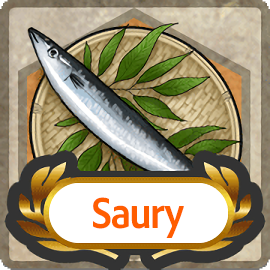
<style>
.page{position:relative;width:270px;height:270px}
.page>*{position:absolute;margin:0}
.t1{font:45px "AdobeClean-Bold";letter-spacing:-0.04em;color:#ff5d00;scale:0.9 1}
</style>
<div class="page">
<p class="t1" style="left:93px;top:197px;width:91px;height:41px">Saury</p>
</div>
